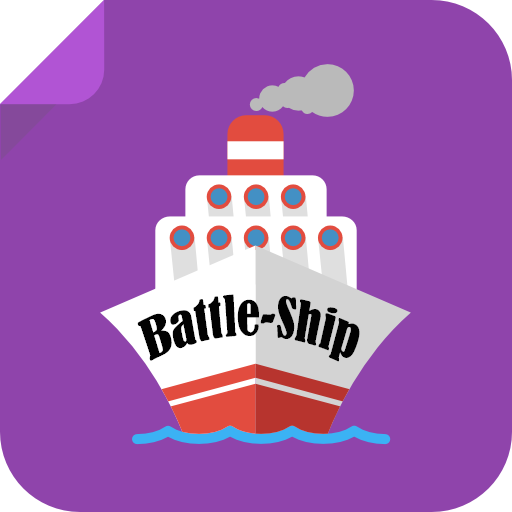
<style>
.page{position:relative;width:512px;height:512px;background:#8f44ab}
.page>*{position:absolute;margin:0}
.t1{font:52.6px "BernardMT-Condensed";color:#020202;scale:0.8 1}
</style>
<div class="page">
<p class="t1" style="left:137px;top:294px;width:223px;height:68px">Battle-Ship</p>
</div>
